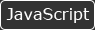
<style>
.page{position:relative;width:95px;height:30px;background:#333333}
.page>*{position:absolute;margin:0}
.t1{font:16px "Verdana";color:#ffffff}
</style>
<div class="page">
<p class="t1" style="left:6px;top:8px;width:84px;height:15px">JavaScript</p>
</div>
